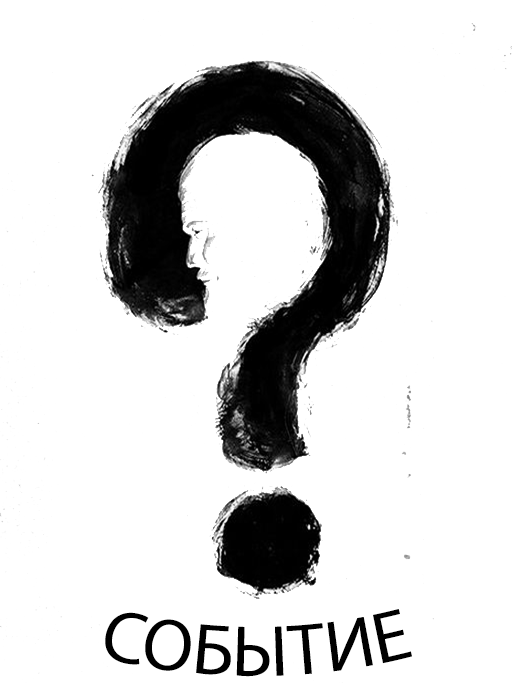
<style>
.page{position:relative;width:512px;height:700px;background:#ffffff}
.page>*{position:absolute;margin:0}
.t1{font:72px "MyriadPro-Regular";color:#000000;text-transform:uppercase;scale:0.95 1}
</style>
<div class="page">
<p class="t1" style="left:105px;top:609px;width:307px;height:68px">Событие</p>
</div>
